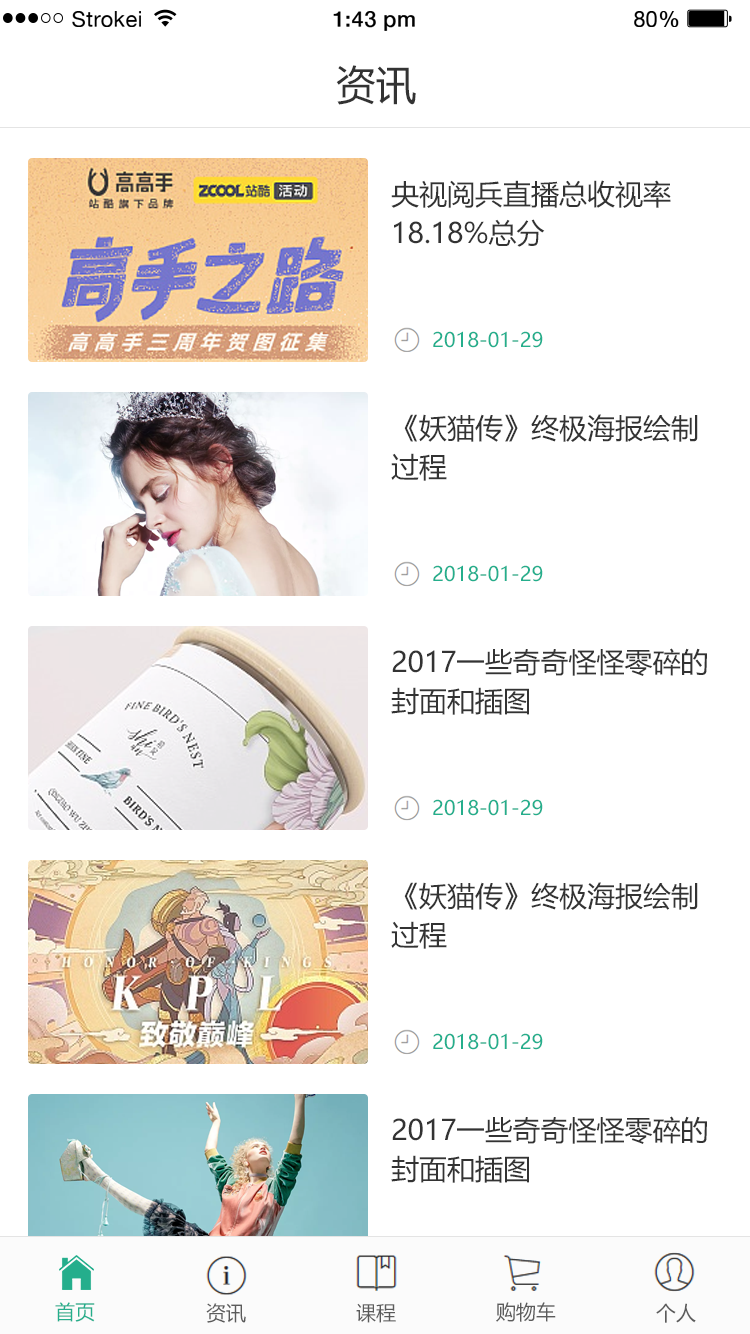
<style>
.page{position:relative;width:750px;height:1334px;background:#ffffff}
.page>*{position:absolute;margin:0}
.t1{font:21.8px "HelveticaNeue";letter-spacing:0.02em;color:#000000}
.t2{font:21.8px "HelveticaNeue-Medium";letter-spacing:0.02em;color:#000000}
.t3{font:40px "MicrosoftYaHei";color:#333333}
.t4{font:28px "MicrosoftYaHei";color:#333333}
.t5{font:20px "MicrosoftYaHei";color:#24ae8c}
.t6{font:20px "MicrosoftYaHei";color:#5b5b5b}
</style>
<div class="page">
<p class="t1" style="left:72px;top:11px;width:69px;height:16px">Strokei</p>
<p class="t2" style="left:333px;top:11px;width:82px;height:20px">1:43 pm</p>
<p class="t1" style="left:634px;top:11px;width:45px;height:16px">80<span class="t2">%</span></p>
<p class="t3" style="left:336px;top:65px;width:80px;height:40px">资讯</p>
<p class="t4" style="left:391px;top:180px;width:280px;height:28px">央视阅兵直播总收视率</p>
<p class="t4" style="left:394px;top:219px;width:151px;height:28px">18.18%总分</p>
<p class="t5" style="left:433px;top:331px;width:110px;height:17px">2018-01-29</p>
<p class="t4" style="left:404px;top:414px;width:294px;height:28px">《妖猫传》终极海报绘制</p>
<p class="t4" style="left:391px;top:453px;width:56px;height:28px">过程</p>
<p class="t5" style="left:433px;top:565px;width:110px;height:17px">2018-01-29</p>
<p class="t4" style="left:392px;top:648px;width:315px;height:28px">2017一些奇奇怪怪零碎的</p>
<p class="t4" style="left:391px;top:687px;width:138px;height:28px">封面和插图</p>
<p class="t5" style="left:433px;top:799px;width:110px;height:17px">2018-01-29</p>
<p class="t4" style="left:404px;top:882px;width:294px;height:28px">《妖猫传》终极海报绘制</p>
<p class="t4" style="left:391px;top:921px;width:56px;height:28px">过程</p>
<p class="t5" style="left:433px;top:1033px;width:110px;height:17px">2018-01-29</p>
<p class="t4" style="left:392px;top:1116px;width:315px;height:28px">2017一些奇奇怪怪零碎的</p>
<p class="t4" style="left:391px;top:1155px;width:138px;height:28px">封面和插图</p>
<p class="t5" style="left:55px;top:1302px;width:40px;height:20px">首页</p>
<p class="t6" style="left:496px;top:1302px;width:60px;height:20px">购物车</p>
<p class="t6" style="left:206px;top:1303px;width:40px;height:20px">资讯</p>
<p class="t6" style="left:356px;top:1303px;width:40px;height:20px">课程</p>
<p class="t6" style="left:656px;top:1303px;width:40px;height:20px">个人</p>
</div>
